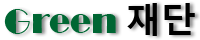
<style>
.page{position:relative;width:200px;height:40px;background:#ffffff}
.page>*{position:absolute;margin:0}
.t1{font:35px "Broadway";color:#006633}
.t2{font:35px "MalgunGothicBold";color:#000000}
</style>
<div class="page">
<p class="t1" style="left:4px;top:3px;width:191px;height:33px">Green <span class="t2">재단</span></p>
</div>
